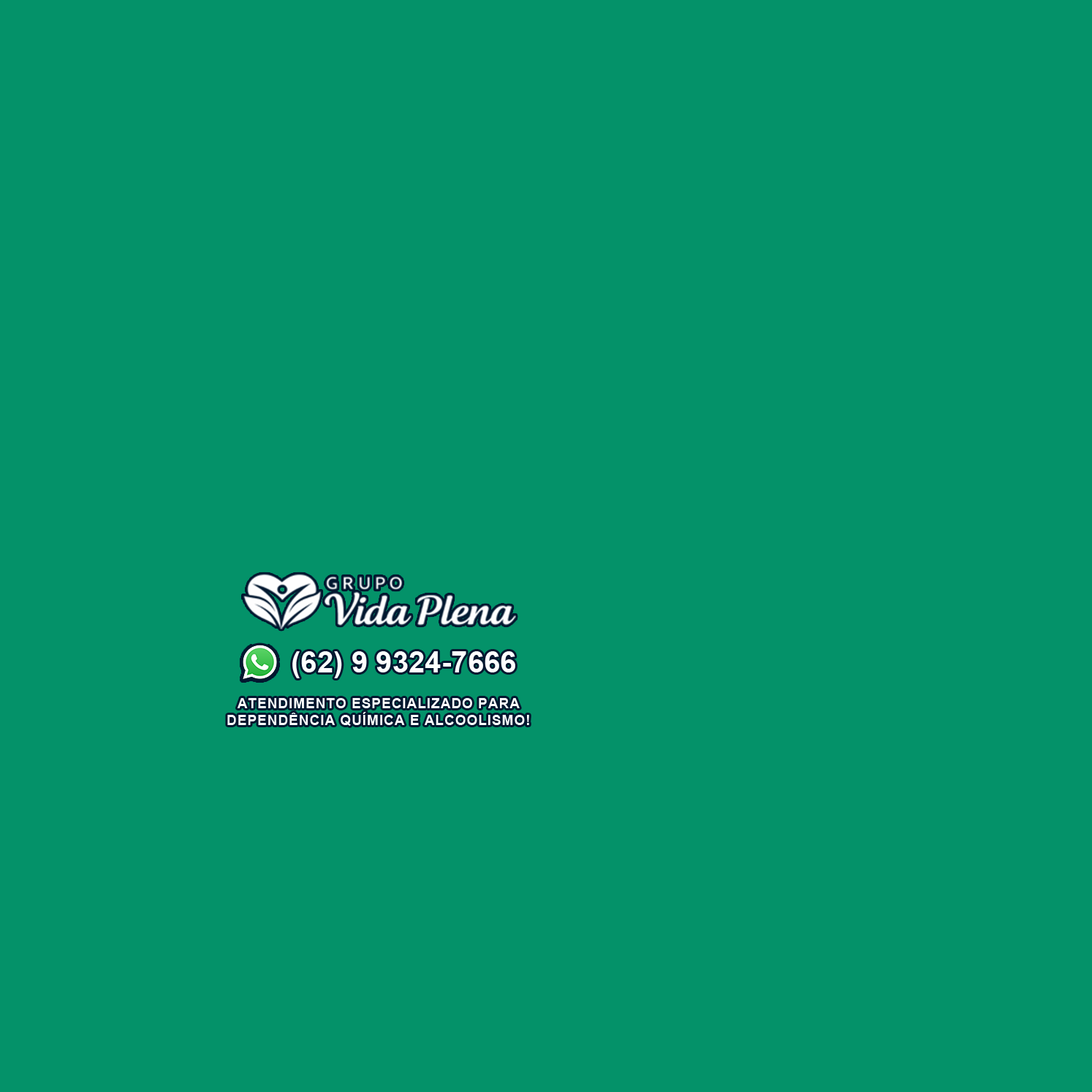
<style>
.page{position:relative;width:1092px;height:1092px;background:#049269}
.page>*{position:absolute;margin:0}
.t1{font:29.4px "Arial-BoldMT";color:#ffffff}
.t2{font:13.8px/17.2px "Arial-BoldMT";letter-spacing:0.05em;color:#ffffff;text-transform:uppercase}
</style>
<div class="page">
<p class="t1" style="left:292px;top:651px;width:223px;height:27px">(62) 9 9324-7666</p>
<p class="t2" style="left:227px;top:698px;width:302px;height:28px;text-align:center">Atendimento especializado para<br>dependência química e alcoolismo!</p>
</div>
